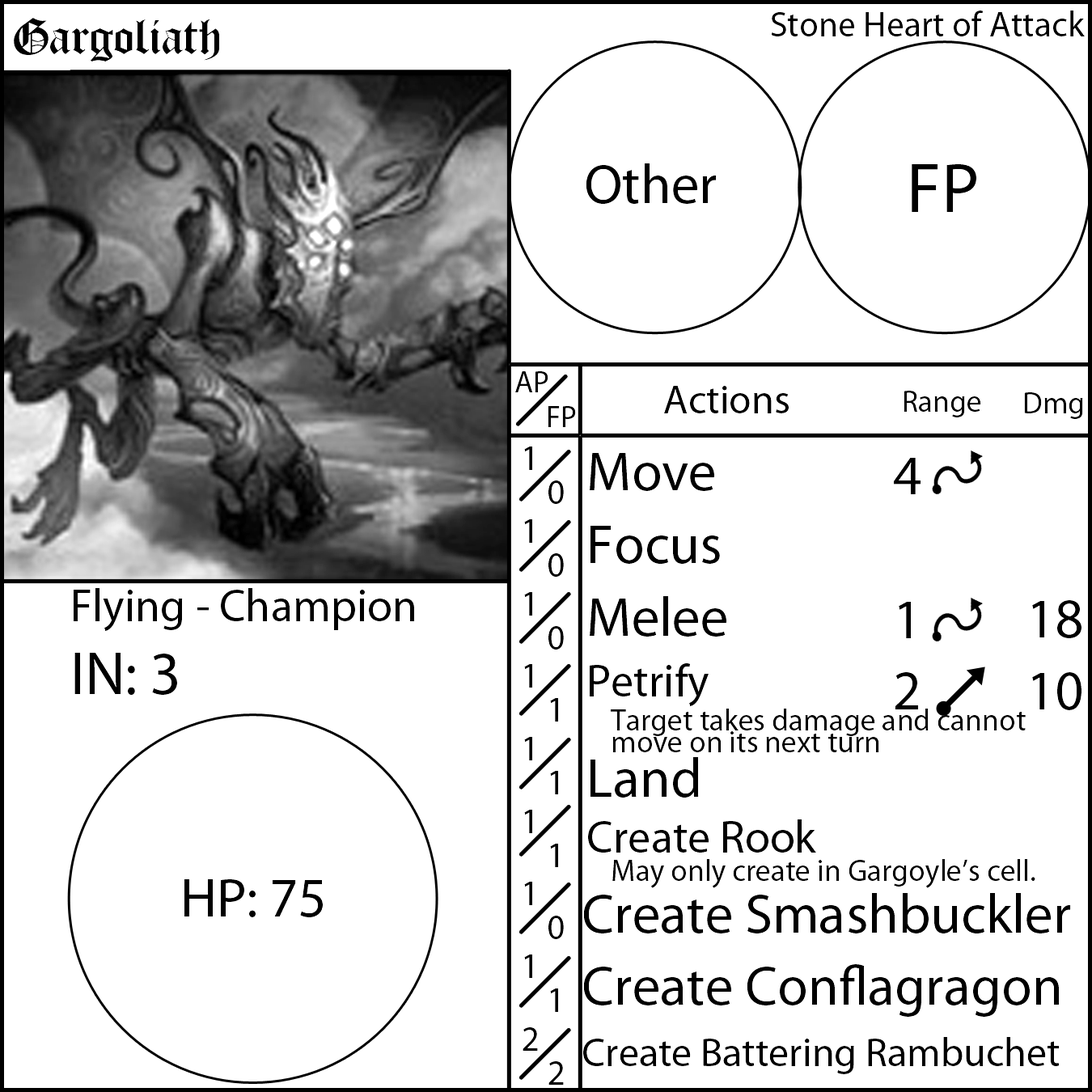
<style>
.page{position:relative;width:1092px;height:1092px;background:#ffffff}
.page>*{position:absolute;margin:0}
.t1{font:55.6px "OldLondon";color:#000000}
.t2{font:35.4px "MyriadPro-Regular";color:#000000}
.t3{font:55.6px "MyriadPro-Regular";color:#000000}
.t4{font:70.8px "MyriadPro-Regular";color:#000000}
.t5{font:30.3px "MyriadPro-Regular";color:#000000}
.t6{font:40.4px "MyriadPro-Regular";color:#000000}
.t7{font:45.5px "MyriadPro-Regular";color:#000000}
.t8{font:60.7px "MyriadPro-Regular";color:#000000}
</style>
<div class="page">
<p class="t1" style="left:14px;top:18px;width:205px;height:43px">Gargoliath</p>
<p class="t2" style="left:771px;top:11px;width:314px;height:25px">Stone Heart of Attack</p>
<p class="t3" style="left:586px;top:163px;width:131px;height:41px">Other</p>
<p class="t4" style="left:912px;top:164px;width:64px;height:48px">FP</p>
<p class="t5" style="left:515px;top:371px;width:33px;height:21px">AP</p>
<p class="t6" style="left:664px;top:386px;width:125px;height:27px">Actions</p>
<p class="t5" style="left:904px;top:391px;width:77px;height:26px">Range</p>
<p class="t5" style="left:1024px;top:392px;width:59px;height:27px">Dmg</p>
<p class="t5" style="left:548px;top:406px;width:28px;height:21px">FP</p>
<p class="t2" style="left:523px;top:447px;width:15px;height:604px">1<br>1<br>1<br>1<br>1<br>1<br>1<br>1<br>2</p>
<p class="t5" style="left:583px;top:453px;width:488px;height:621px"><span class="t3">Move<br>Focus<br>Melee<br></span><span class="t7">Petrify</span><br> Target takes damage and cannot  <br> move on its next turn<br><span class="t3">Land<br></span><span class="t7">Create Rook<br></span> May only create in Gargoyle’s cell.<br><span class="t3">Create Smashbuckler<br>Create Conflagragon<br></span><span class="t6">Create Battering Rambuchet</span></p>
<p class="t3" style="left:894px;top:458px;width:27px;height:251px;text-align:center">4<br><br>1<br>2</p>
<p class="t2" style="left:548px;top:480px;width:16px;height:605px">0<br>0<br>0<br>1<br>1<br>1<br>0<br>1<br>2</p>
<p class="t7" style="left:74px;top:588px;width:340px;height:107px">Flying - Champion<br><span class="t8">IN: 3</span></p>
<p class="t3" style="left:1032px;top:600px;width:49px;height:110px;text-align:center">18<br>10</p>
<p class="t3" style="left:184px;top:879px;width:139px;height:38px">HP: 75</p>
</div>
